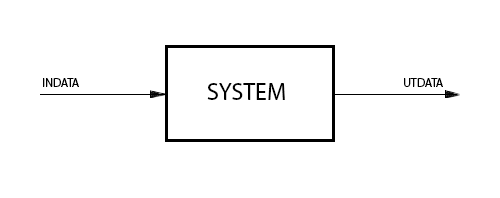
<style>
.page{position:relative;width:500px;height:198px;background:#ffffff}
.page>*{position:absolute;margin:0}
.t1{font:12px "MyriadPro-Regular";color:#000000}
.t2{font:24px "MyriadPro-Regular";color:#000000}
</style>
<div class="page">
<p class="t1" style="left:43px;top:78px;width:36px;height:9px">INDATA</p>
<p class="t1" style="left:404px;top:78px;width:39px;height:9px">UTDATA</p>
<p class="t2" style="left:207px;top:83px;width:78px;height:17px">SYSTEM</p>
</div>
